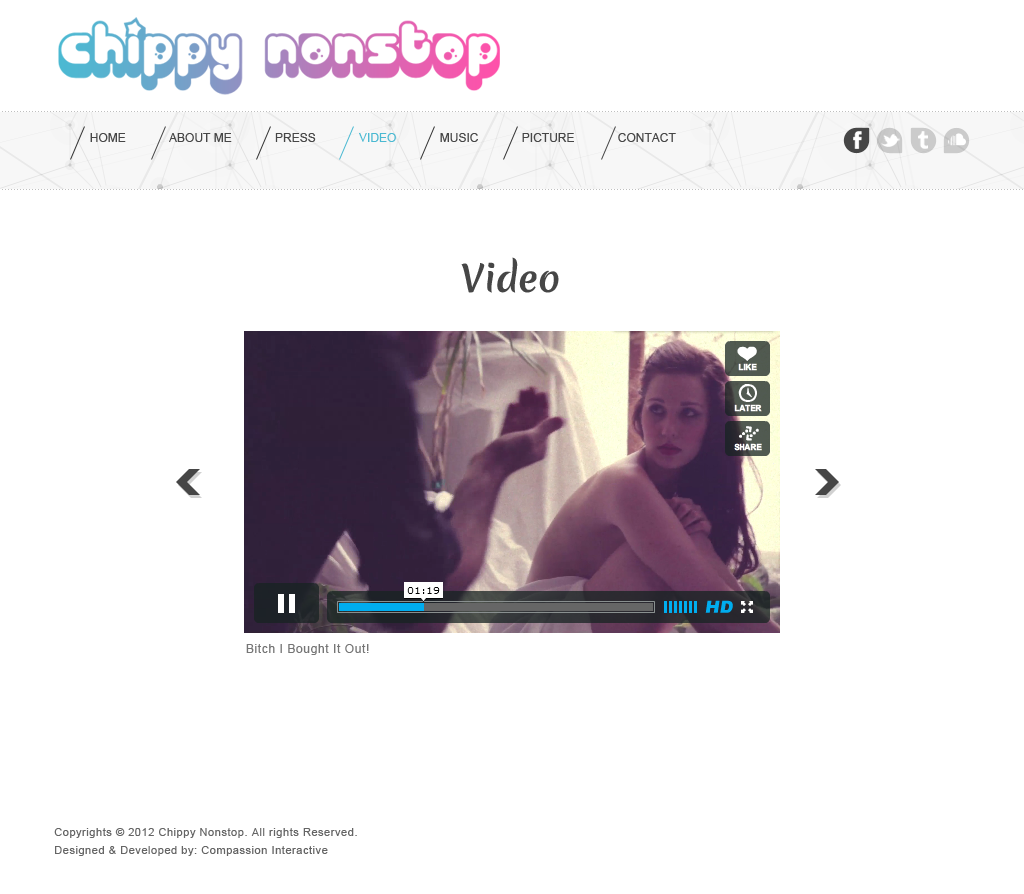
<style>
.page{position:relative;width:1024px;height:894px;background:#ffffff}
.page>*{position:absolute;margin:0}
.t1{font:12px "ArialMT";color:#464646}
.t2{font:12px "ArialMT";color:#4bb9d2}
.t3{font:36px "MeriendaOne-Regular";color:#464646}
.t4{font:12px "ArialMT";letter-spacing:0.05em;color:#767676}
.t5{font:11px/18px "ArialMT";letter-spacing:0.05em;color:#656565}
</style>
<div class="page">
<p class="t1" style="left:90px;top:133px;width:586px;height:9px">HOME             ABOUT ME             PRESS             <span class="t2">VIDEO             </span>MUSIC             PICTURE             CONTACT</p>
<p class="t3" style="left:461px;top:257px;width:98px;height:36px">Video</p>
<p class="t4" style="left:246px;top:644px;width:123px;height:11px">Bitch I Bought It Out!</p>
<p class="t5" style="left:54px;top:828px;width:303px;height:28px">Copyrights © 2012 Chippy Nonstop. All rights Reserved.<br>Designed &amp; Developed by: Compassion Interactive</p>
</div>
